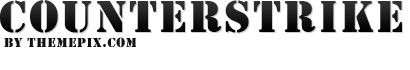
<style>
.page{position:relative;width:410px;height:70px;background:#ffffff}
.page>*{position:absolute;margin:0}
.t1{font:47px "Stencil";letter-spacing:0.05em;color:#1a1a1a}
.t2{font:14px "Stencil";letter-spacing:0.05em;color:#111111}
</style>
<div class="page">
<p class="t1" style="left:0px;top:0px;width:402px;height:33px">CounterStrike</p>
<p class="t2" style="left:4px;top:37px;width:133px;height:11px">by themepix.com</p>
</div>
